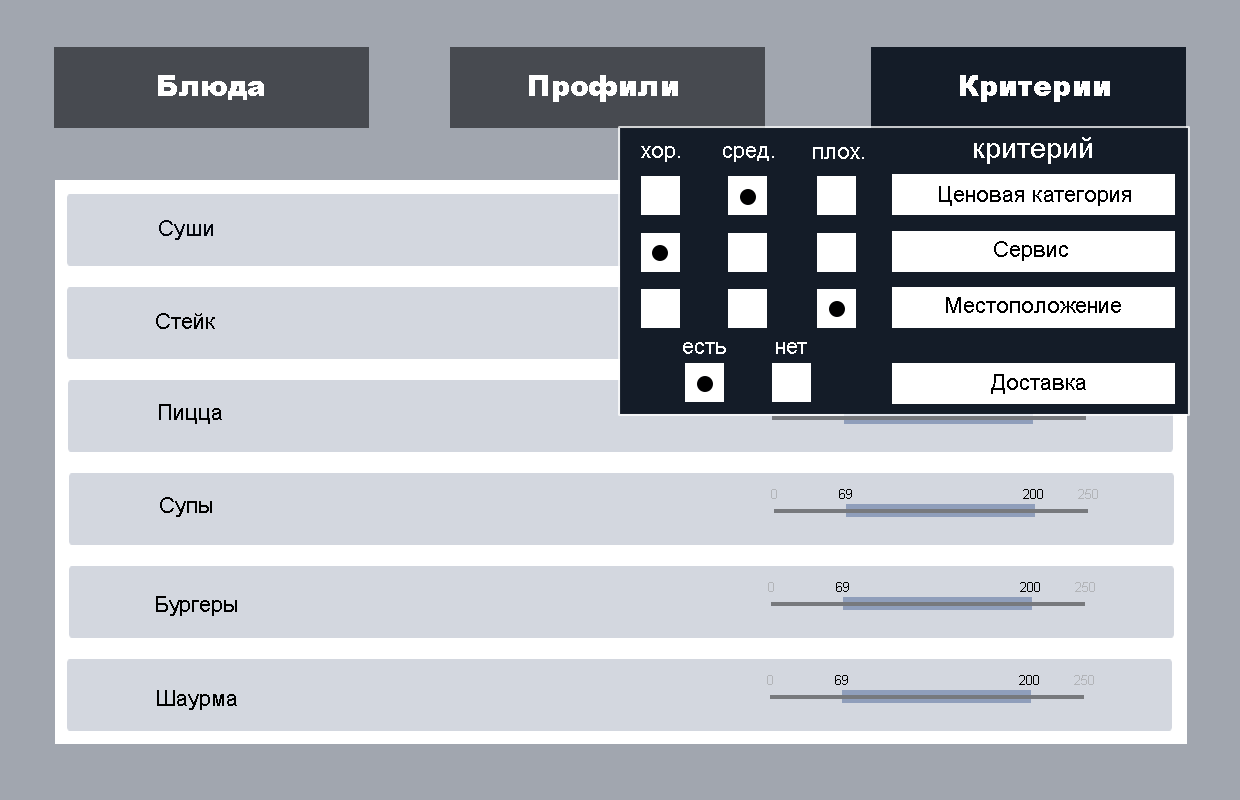
<style>
.page{position:relative;width:1240px;height:800px;background:#d3d7df}
.page>*{position:absolute;margin:0}
.t1{font:28.8px "Arial-Black";letter-spacing:0.003em;color:#ffffff}
.t2{font:28.8px "ArialMT";letter-spacing:0.003em;color:#ffffff}
.t3{font:21.6px "ArialMT";letter-spacing:0.003em;color:#ffffff}
.t4{font:21.6px "ArialMT";letter-spacing:0.003em;color:#000001}
.t5{font:21.6px "ArialMT";letter-spacing:0.003em;color:#02060e}
.t6{font:21.6px "ArialMT";letter-spacing:0.003em;color:#000000}
.t7{font:13.2px "ArialMT";letter-spacing:0.003em;color:#b2b4b8}
.t8{font:13.2px "ArialMT";letter-spacing:0.003em;color:#000000}
</style>
<div class="page">
<p class="t1" style="left:158px;top:75px;width:106px;height:25px">Блюда</p>
<p class="t1" style="left:529px;top:75px;width:149px;height:27px">Профили</p>
<p class="t1" style="left:960px;top:75px;width:150px;height:27px">Критерии</p>
<p class="t2" style="left:974px;top:137px;width:118px;height:27px">критерий</p>
<p class="t3" style="left:641px;top:146px;width:39px;height:16px">хор.</p>
<p class="t3" style="left:723px;top:146px;width:51px;height:16px">сред.</p>
<p class="t3" style="left:813px;top:147px;width:51px;height:12px">плох.</p>
<p class="t4" style="left:939px;top:186px;width:192px;height:20px">Ценовая категория</p>
<p class="t5" style="left:159px;top:220px;width:54px;height:20px">Суши</p>
<p class="t6" style="left:994px;top:241px;width:74px;height:20px">Сервис</p>
<p class="t6" style="left:946px;top:297px;width:175px;height:16px">Местоположение</p>
<p class="t6" style="left:156px;top:313px;width:59px;height:16px">Стейк</p>
<p class="t3" style="left:683px;top:342px;width:43px;height:12px">есть</p>
<p class="t3" style="left:776px;top:342px;width:31px;height:12px">нет</p>
<p class="t6" style="left:991px;top:374px;width:95px;height:20px">Доставка</p>
<p class="t6" style="left:159px;top:404px;width:63px;height:20px">Пицца</p>
<p class="t6" style="left:160px;top:497px;width:52px;height:20px">Супы</p>
<p class="t7" style="left:771px;top:489px;width:6px;height:10px">0</p>
<p class="t8" style="left:839px;top:489px;width:13px;height:10px">69</p>
<p class="t8" style="left:1023px;top:489px;width:20px;height:10px">200</p>
<p class="t7" style="left:1078px;top:489px;width:20px;height:10px">250</p>
<p class="t7" style="left:768px;top:582px;width:6px;height:10px">0</p>
<p class="t8" style="left:836px;top:582px;width:13px;height:10px">69</p>
<p class="t8" style="left:1020px;top:582px;width:20px;height:10px">200</p>
<p class="t7" style="left:1075px;top:582px;width:20px;height:10px">250</p>
<p class="t6" style="left:156px;top:596px;width:81px;height:20px">Бургеры</p>
<p class="t7" style="left:767px;top:675px;width:6px;height:10px">0</p>
<p class="t8" style="left:835px;top:675px;width:13px;height:10px">69</p>
<p class="t8" style="left:1019px;top:675px;width:20px;height:10px">200</p>
<p class="t7" style="left:1074px;top:675px;width:20px;height:10px">250</p>
<p class="t6" style="left:157px;top:690px;width:80px;height:20px">Шаурма</p>
</div>
